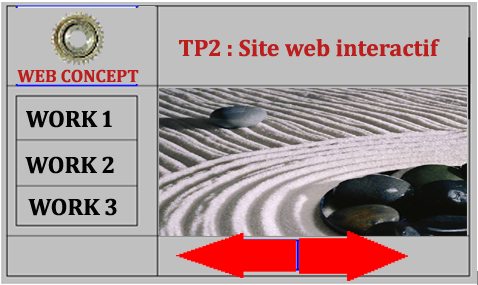
<style>
.page{position:relative;width:478px;height:285px;background:#c0c0c0}
.page>*{position:absolute;margin:0}
.t1{font:24px "Cambria-Bold";color:#bc1d1d}
.t2{font:18px "Cambria-Bold";color:#bc1d1d}
.t3{font:24px "Cambria-Bold";color:#030303}
</style>
<div class="page">
<p class="t1" style="left:179px;top:39px;width:261px;height:18px">TP2 : Site web interactif</p>
<p class="t2" style="left:17px;top:69px;width:122px;height:14px">WEB CONCEPT</p>
<p class="t3" style="left:26px;top:110px;width:86px;height:18px">WORK 1</p>
<p class="t3" style="left:25px;top:156px;width:89px;height:18px">WORK 2</p>
<p class="t3" style="left:28px;top:198px;width:89px;height:18px">WORK 3</p>
</div>
